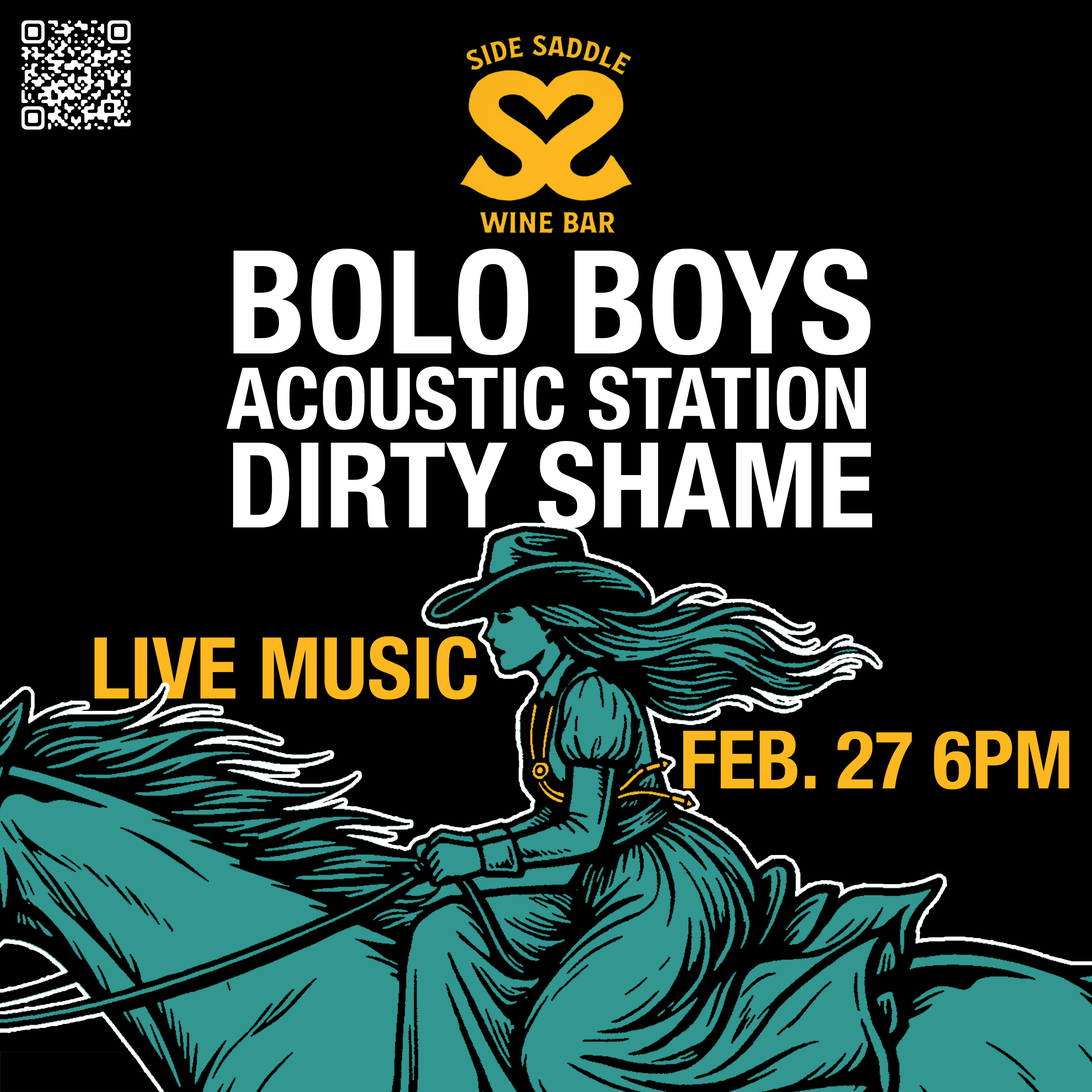
<style>
.page{position:relative;width:1092px;height:1092px;background:#000000}
.page>*{position:absolute;margin:0}
.t1{font:85.5px/51.8px "HelveticaNeue-CondensedBold";color:#ffffff}
.t2{font:143.9px/51.8px "HelveticaNeue-CondensedBold";color:#ffffff}
.t3{font:118.7px/75px "HelveticaNeue-CondensedBold";color:#ffffff}
.t4{font:85.5px "HelveticaNeue-CondensedBold";color:#fdb81f}
.t5{font:80.7px "HelveticaNeue-CondensedBold";color:#fdb81f}
</style>
<div class="page">
<p class="t1" style="left:226px;top:249px;width:646px;height:280px"><span class="t2">BOLO BOYS<br></span>ACOUSTIC STATION<br><span class="t3">DIRTY SHAME</span></p>
<p class="t4" style="left:94px;top:636px;width:383px;height:64px">LIVE MUSIC</p>
<p class="t5" style="left:683px;top:731px;width:386px;height:59px">FEB. 27 6PM</p>
</div>
